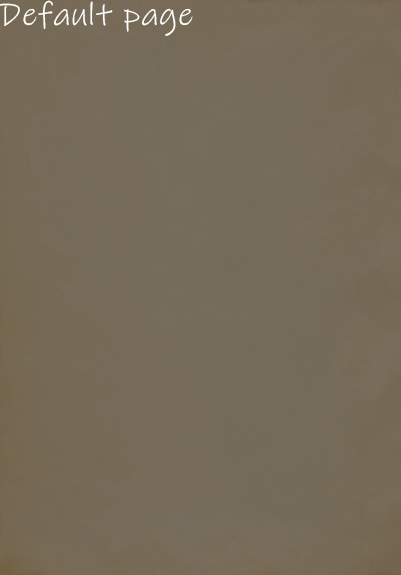
<style>
.page{position:relative;width:401px;height:575px}
.page>*{position:absolute;margin:0}
.t1{font:33px "InkFree";letter-spacing:0.025em;color:#ffffff}
</style>
<div class="page">
<p class="t1" style="left:0px;top:0px;width:193px;height:36px">Default page</p>
</div>
